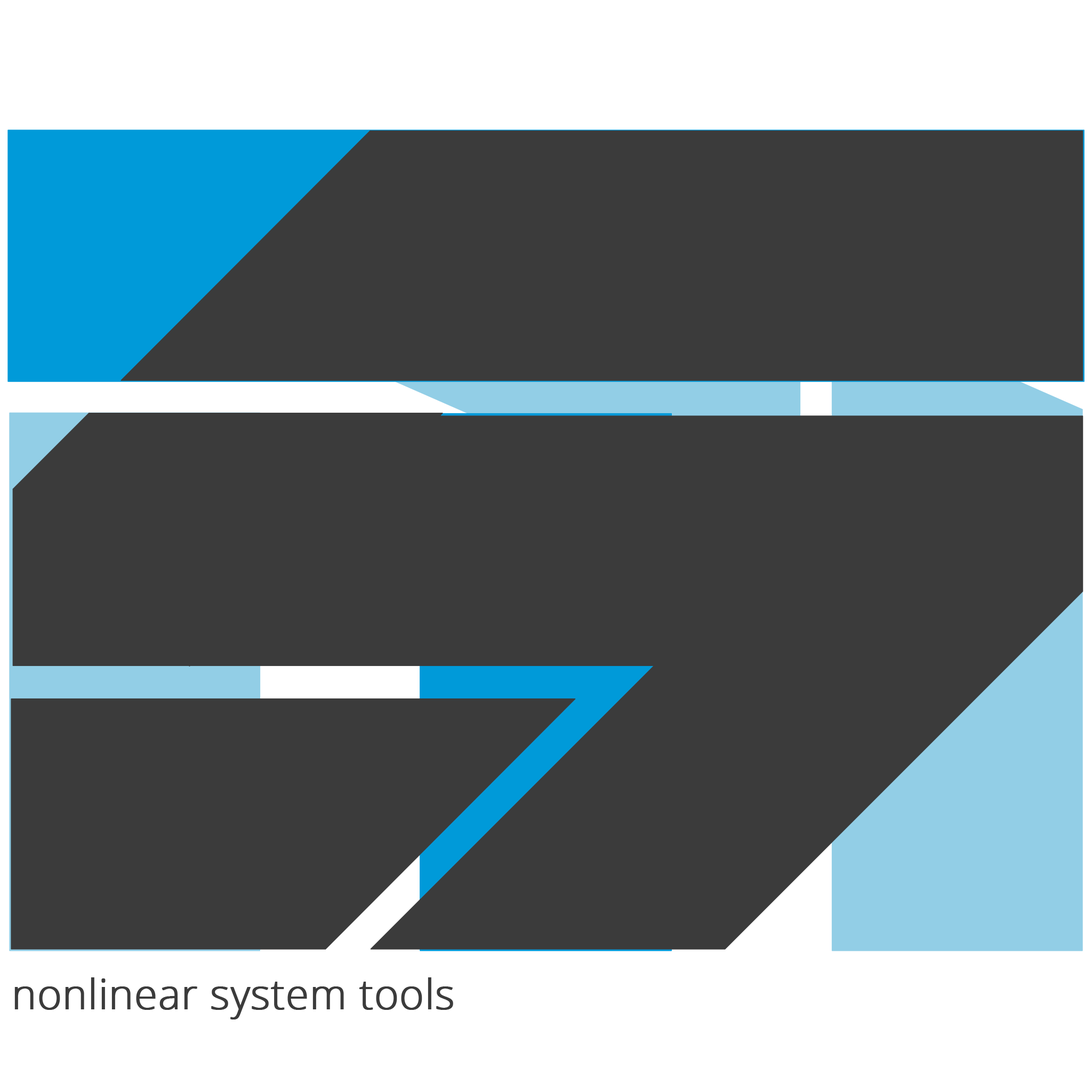
<style>
.page{position:relative;width:1092px;height:1092px;background:#3b3b3b}
.page>*{position:absolute;margin:0}
.t1{font:1170.6px "Rektec";color:#3b3b3b;font-weight:bold}
.t2{font:41.3px "OpenSans-Light";color:#3b3b3b;font-weight:bold}
</style>
<div class="page">
<p class="t1" style="left:7px;top:130px;width:1078px;height:821px">T</p>
<p class="t1" style="left:11px;top:130px;width:1072px;height:820px">S</p>
<p class="t2" style="left:14px;top:977px;width:439px;height:42px">nonlinear system tools</p>
</div>
